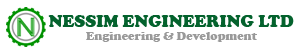
<style>
.page{position:relative;width:300px;height:52px;background:#ffffff}
.page>*{position:absolute;margin:0}
.t1{font:17px "CooperBlack";color:#04612d}
.t2{font:12px "CooperBlack";color:#999999}
</style>
<div class="page">
<p class="t1" style="left:48px;top:15px;width:246px;height:12px">NESSIM ENGINEERING LTD</p>
<p class="t2" style="left:86px;top:32px;width:171px;height:10px">Engineering &amp; Development</p>
</div>
